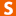
<style>
.page{position:relative;width:16px;height:16px;background:#f06000}
.page>*{position:absolute;margin:0}
.t1{font:25px "MyriadPro-Regular";color:#ffffff;font-weight:bold}
</style>
<div class="page">
<p class="t1" style="left:4px;top:1px;width:9px;height:14px">s</p>
</div>
